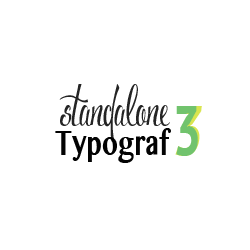
<style>
.page{position:relative;width:250px;height:250px;background:#ffffff}
.page>*{position:absolute;margin:0}
.t1{font:42.1px "Voluptate_demo";color:#242424;scale:0.62 1}
.t2{font:70.9px "PTSans-CaptionBold";color:#71c36d;scale:0.67 1}
.t3{font:70.1px "PTSans-CaptionBold";color:#71c36d;scale:0.67 1}
.t4{font:36.7px "TeluguMN-Bold";color:#000000;scale:0.71 1}
</style>
<div class="page">
<p class="t1" style="left:59px;top:84px;width:111px;height:59px">Sstandalone</p>
<p class="t2" style="left:175px;top:106px;width:27px;height:50px">3</p>
<p class="t3" style="left:176px;top:106px;width:22px;height:50px">3</p>
<p class="t4" style="left:55px;top:128px;width:116px;height:35px">Typograf</p>
</div>
